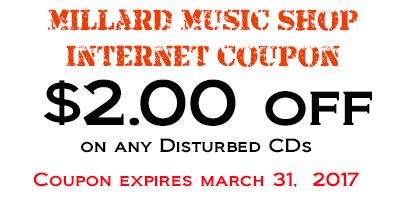
<style>
.page{position:relative;width:400px;height:200px;background:#ffffff}
.page>*{position:absolute;margin:0}
.t1{font:30px "ArmaliteRifle";color:#ee3e04}
.t2{font:60.1px "Biondi";color:#030303}
.t3{font:18px "Biondi";color:#030303}
.t4{font:18px "Biondi";color:#fe0113}
</style>
<div class="page">
<p class="t1" style="left:48px;top:9px;width:310px;height:58px;text-align:center">Millard Music Shop<br>internet coupon</p>
<p class="t2" style="left:43px;top:79px;width:329px;height:47px">$2.00 off</p>
<p class="t3" style="left:81px;top:138px;width:231px;height:15px">on any Disturbed CDs</p>
<p class="t4" style="left:33px;top:172px;width:326px;height:16px">Coupon expires march 31,  2017</p>
</div>
